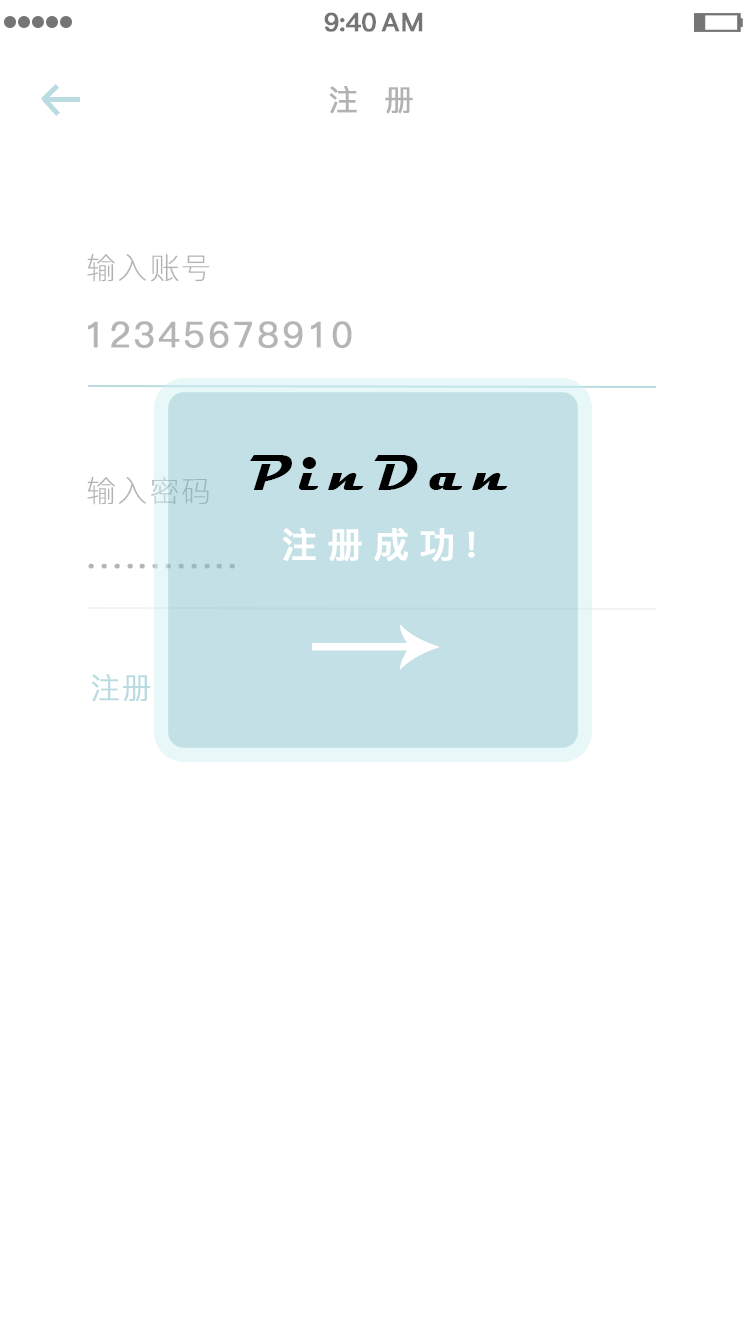
<style>
.page{position:relative;width:750px;height:1334px;background:#ffffff}
.page>*{position:absolute;margin:0}
.t1{font:25.4px "PingFang-SC-Bold";letter-spacing:-0.028em;color:#757575;font-weight:bold}
.t2{font:25.4px "PingFang-SC-Bold";letter-spacing:0.052em;color:#757575;font-weight:bold}
.t3{font:29.4px "PingFang-SC-Medium";letter-spacing:0.052em;color:#b2b2b2;font-weight:bold}
.t4{font:29.4px "PingFang-SC-ExtraLight";letter-spacing:0.052em;color:#afb1b3;font-weight:bold}
.t5{font:35.4px "PingFang-SC-Medium";letter-spacing:0.072em;color:#b5b5b5;font-weight:bold}
.t6{font:51.5px "Magneto-Bold";letter-spacing:0.214em;color:#000000}
.t7{font:29.4px "PingFang-SC-ExtraLight";letter-spacing:0.052em;font-weight:bold}
.t8{font:35.4px "PingFang-SC-Bold";letter-spacing:0.272em;color:#ffffff;font-weight:bold}
.t9{font:35.4px "PingFang-SC-Medium";letter-spacing:0.072em;font-weight:bold}
.t10{font:29.4px "PingFang-SC-Regular";letter-spacing:0.052em;color:#badce1;font-weight:bold}
</style>
<div class="page">
<p class="t1" style="left:324px;top:12px;width:52px;height:20px">9:40</p>
<p class="t2" style="left:381px;top:12px;width:42px;height:20px">AM</p>
<p class="t3" style="left:329px;top:86px;width:84px;height:28px">注  册</p>
<p class="t4" style="left:87px;top:253px;width:123px;height:29px">输入账号</p>
<p class="t5" style="left:88px;top:321px;width:264px;height:27px">12345678910</p>
<p class="t6" style="left:250px;top:455px;width:258px;height:35px">PinDan</p>
<p class="t7" style="left:87px;top:476px;width:122px;height:29px">输入密码</p>
<p class="t8" style="left:282px;top:527px;width:193px;height:35px">注册成功!</p>
<p class="t9" style="left:88px;top:563px;width:147px;height:6px">............</p>
<p class="t10" style="left:91px;top:674px;width:60px;height:28px">注册</p>
</div>
